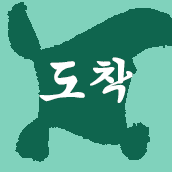
<style>
.page{position:relative;width:172px;height:172px;background:#80d2bc}
.page>*{position:absolute;margin:0}
.t1{font:47px "CRº×Ã¼";color:#ffffff}
</style>
<div class="page">
<p class="t1" style="left:39px;top:57px;width:94px;height:46px">도착</p>
</div>
